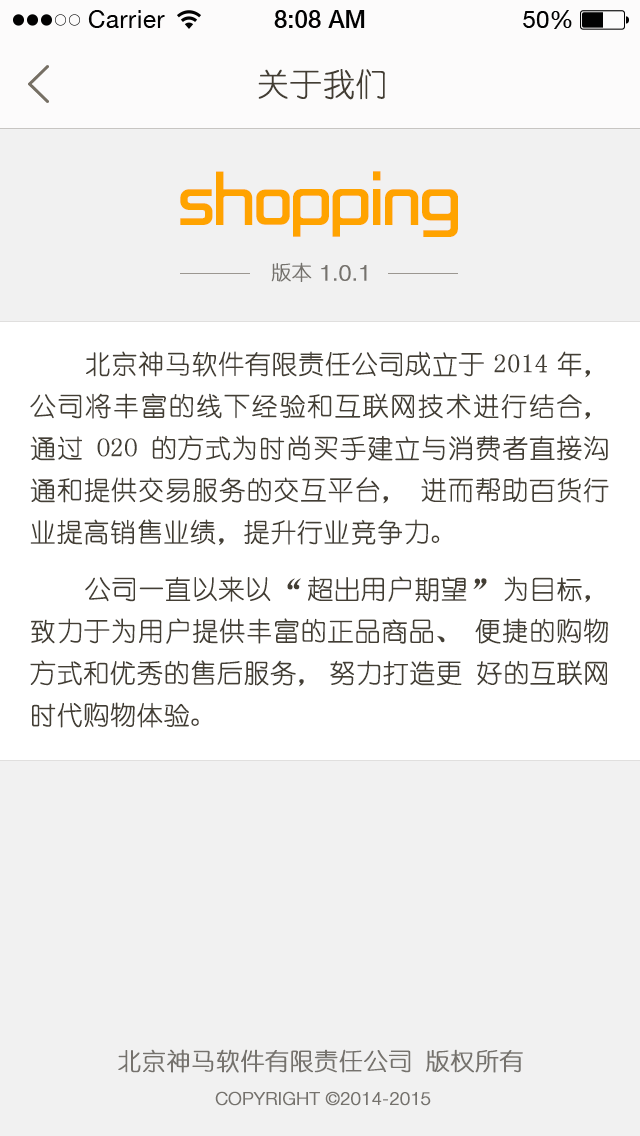
<style>
.page{position:relative;width:640px;height:1136px;background:#f1f1f1}
.page>*{position:absolute;margin:0}
.t1{font:32px "YouYuan";color:#433d33;text-transform:uppercase;font-weight:bold}
.t2{font:72px "ShiShangZhongHei";color:#ffa300}
.t3{font:20px "YouYuan";color:#75726d;text-transform:uppercase;font-weight:bold}
.t4{font:22px "HelveticaNeueLTPro-Lt";color:#75726d;text-transform:uppercase;font-weight:bold}
.t5{font:26px/42px "YouYuan";color:#433e34;text-transform:uppercase;font-weight:bold}
.t6{font:24px "YouYuan";color:#75726d;text-transform:uppercase;font-weight:bold}
.t7{font:18px "HelveticaNeueLTPro-Lt";color:#75726d;text-transform:uppercase;font-weight:bold}
</style>
<div class="page">
<p class="t1" style="left:258px;top:69px;width:127px;height:31px">关于我们</p>
<p class="t2" style="left:180px;top:171px;width:278px;height:66px">shopping</p>
<p class="t3" style="left:271px;top:262px;width:41px;height:20px">版本</p>
<p class="t4" style="left:321px;top:265px;width:46px;height:16px">1.0.1</p>
<p class="t5" style="left:30px;top:351px;width:579px;height:195px;text-align:justify">北京神马软件有限责任公司成立于2014年，公司将丰富的线下经验和互联网技术进行结合，通过O2O的方式为时尚买手建立与消费者直接沟通和提供交易服务的交互平台，进而帮助百货行业提高销售业绩，提升行业竞争力。</p>
<p class="t5" style="left:30px;top:576px;width:578px;height:152px;text-align:justify">公司一直以来以“超出用户期望”为目标，致力于为用户提供丰富的正品商品、便捷的购物方式和优秀的售后服务，努力打造更 好的互联网时代购物体验。</p>
<p class="t6" style="left:118px;top:1049px;width:405px;height:24px">北京神马软件有限责任公司 版权所有</p>
<p class="t7" style="left:215px;top:1091px;width:216px;height:15px">Copyright ©2014-2015</p>
</div>
